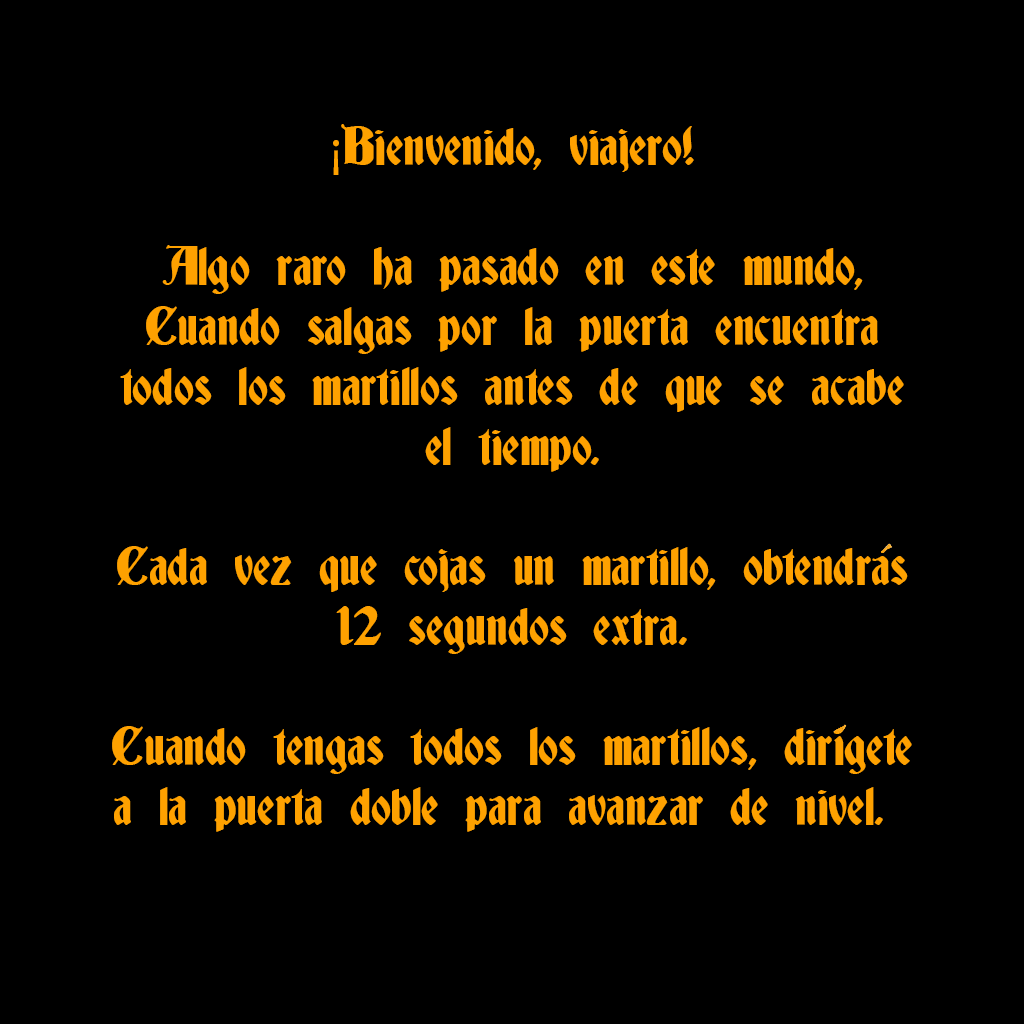
<style>
.page{position:relative;width:1024px;height:1024px;background:#000000}
.page>*{position:absolute;margin:0}
.t1{font:50px "Deutsch-Gothic";color:#fea100}
.t2{font:50px "MyriadPro-Regular";color:#fea100}
</style>
<div class="page">
<p class="t1" style="left:112px;top:124px;width:800px;height:708px;text-align:center"><span class="t2">¡</span>Bienvenido, viajero!<br> <br>Algo raro ha pasado en este mundo,<br>Cuando salgas por la puerta encuentra<br>todos los martillos antes de que se acabe<br>el tiempo.<br>  <br>Cada vez que cojas un martillo, obtendras<br>12 segundos extra.<br>  <br>Cuando tengas todos los martillos, dirigete<br>a la puerta doble para avanzar de nivel.</p>
</div>
